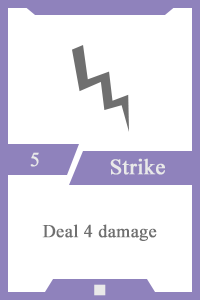
<style>
.page{position:relative;width:200px;height:300px;background:#ffffff}
.page>*{position:absolute;margin:0}
.t1{font:20px "TimesNewRomanPSMT";color:#e9e9e9;font-weight:bold}
.t2{font:22px "TimesNewRomanPSMT";color:#e9e9e9;font-weight:bold}
.t3{font:18px "TimesNewRomanPSMT";color:#6f6f6f;font-weight:bold}
.t4{font:14px "AdobeHeitiStd-Regular";color:#e9e9e9;font-weight:bold}
</style>
<div class="page">
<p class="t1" style="left:30px;top:152px;width:9px;height:15px">5</p>
<p class="t2" style="left:110px;top:158px;width:55px;height:17px">Strike</p>
<p class="t3" style="left:42px;top:224px;width:115px;height:17px">Deal 4 damage</p>
<p class="t4" style="left:94px;top:284px;width:12px;height:12px">■</p>
</div>
